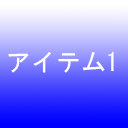
<style>
.page{position:relative;width:128px;height:128px}
.page>*{position:absolute;margin:0}
.t1{font:25px "MS-Gothic";color:#ffffff}
</style>
<div class="page">
<p class="t1" style="left:8px;top:51px;width:106px;height:22px">アイテム1</p>
</div>
